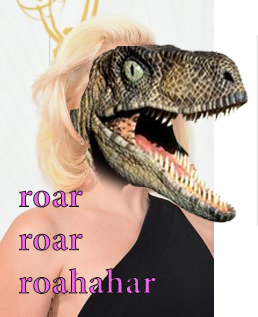
<style>
.page{position:relative;width:258px;height:317px}
.page>*{position:absolute;margin:0}
.t1{font:36px "MinionPro-Bold"}
</style>
<div class="page">
<p class="t1" style="left:19px;top:190px;width:138px;height:104px">roar<br>roar<br>roahahar</p>
</div>
